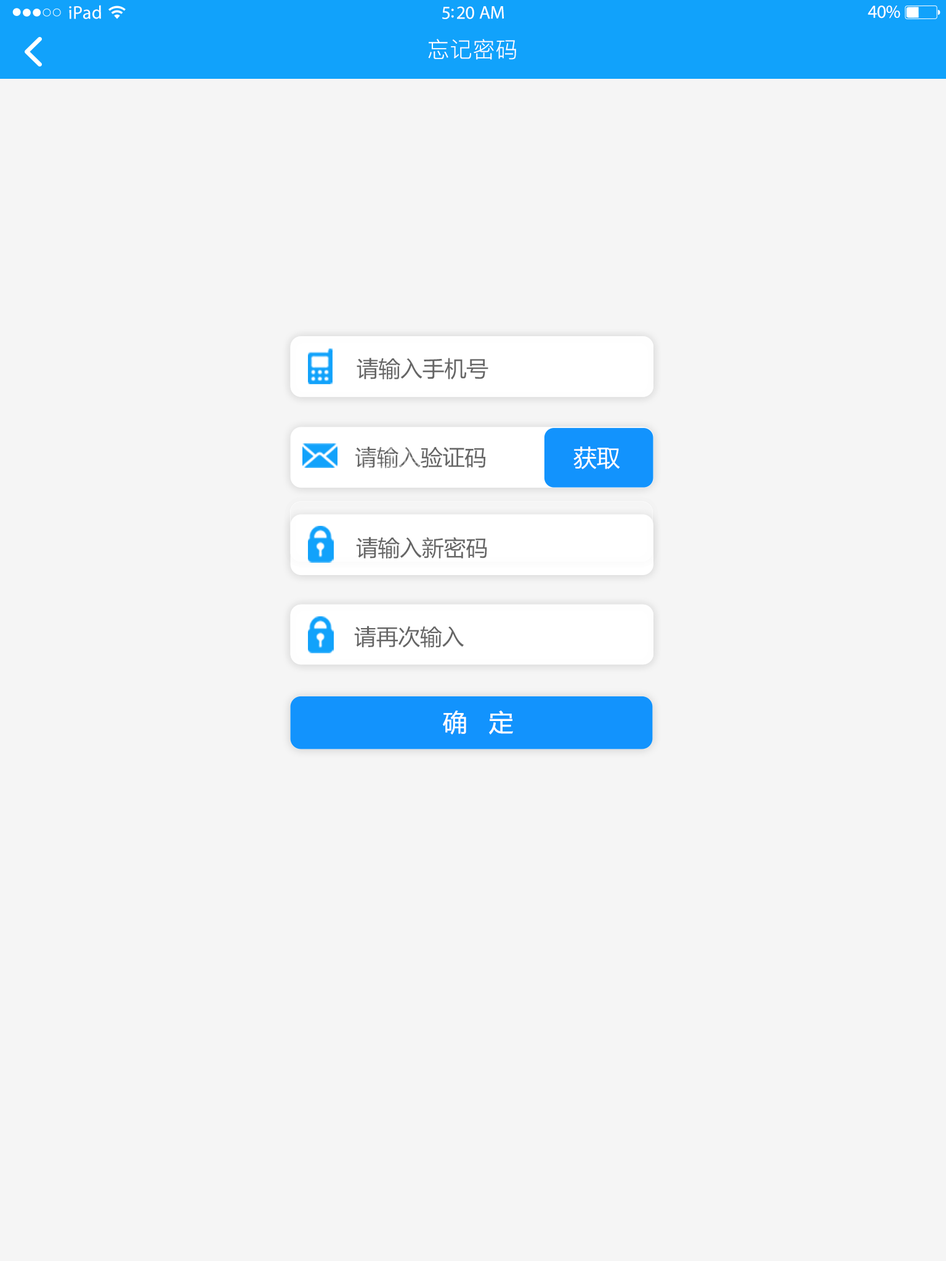
<style>
.page{position:relative;width:946px;height:1261px;background:#f5f5f5}
.page>*{position:absolute;margin:0}
.t1{font:18.5px "MyriadPro-Regular";letter-spacing:0.02em;color:#ffffff}
.t2{font:18.5px "MyriadPro-Regular";letter-spacing:-0.02em;color:#ffffff}
.t3{font:22.2px "PingFang-SC-Regular";letter-spacing:0.03em;color:#ffffff}
.t4{font:22px "MicrosoftYaHei";color:#666666}
.t5{font:23.2px "MicrosoftYaHei";color:#ffffff}
.t6{font:24.4px "MicrosoftYaHei";color:#ffffff}
</style>
<div class="page">
<p class="t1" style="left:69px;top:5px;width:32px;height:14px">iPad</p>
<p class="t2" style="left:867px;top:6px;width:33px;height:12px">40%</p>
<p class="t2" style="left:442px;top:6px;width:62px;height:13px">5:20 AM</p>
<p class="t3" style="left:428px;top:39px;width:88px;height:21px">忘记密码</p>
<p class="t4" style="left:356px;top:358px;width:132px;height:22px">请输入手机号</p>
<p class="t4" style="left:355px;top:446px;width:131px;height:23px">请输入验证码</p>
<p class="t5" style="left:573px;top:446px;width:47px;height:23px">获取</p>
<p class="t4" style="left:356px;top:537px;width:131px;height:21px">请输入新密码</p>
<p class="t4" style="left:354px;top:626px;width:110px;height:22px">请再次输入</p>
<p class="t6" style="left:443px;top:710px;width:70px;height:25px">确   定</p>
</div>
